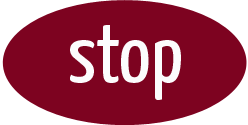
<style>
.page{position:relative;width:248px;height:125px;background:#7d0320}
.page>*{position:absolute;margin:0}
.t1{font:85px "YanoneKaffeesatz-Regular";color:#fcfcfd}
</style>
<div class="page">
<p class="t1" style="left:70px;top:25px;width:111px;height:75px">stop</p>
</div>
